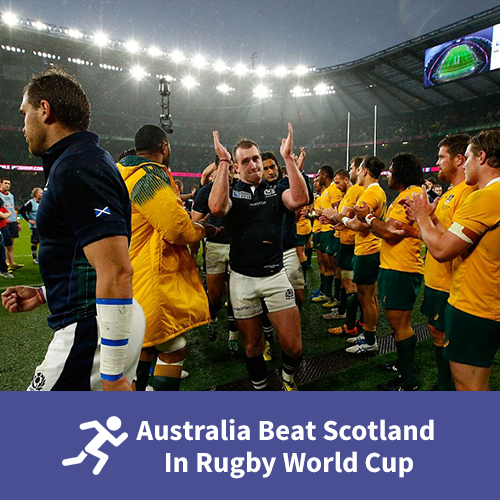
<style>
.page{position:relative;width:500px;height:500px}
.page>*{position:absolute;margin:0}
.t1{font:29px/32px "SourceSansPro-Bold";color:#ffffff}
</style>
<div class="page">
<p class="t1" style="left:136px;top:419px;width:298px;height:60px;text-align:center">Australia Beat Scotland <br>In Rugby World Cup</p>
</div>
